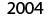
<style>
.page{position:relative;width:50px;height:16px;background:#ffffff}
.page>*{position:absolute;margin:0}
.t1{font:18px "MyriadPro-Regular";color:#000000}
</style>
<div class="page">
<p class="t1" style="left:7px;top:2px;width:37px;height:12px">2004</p>
</div>
